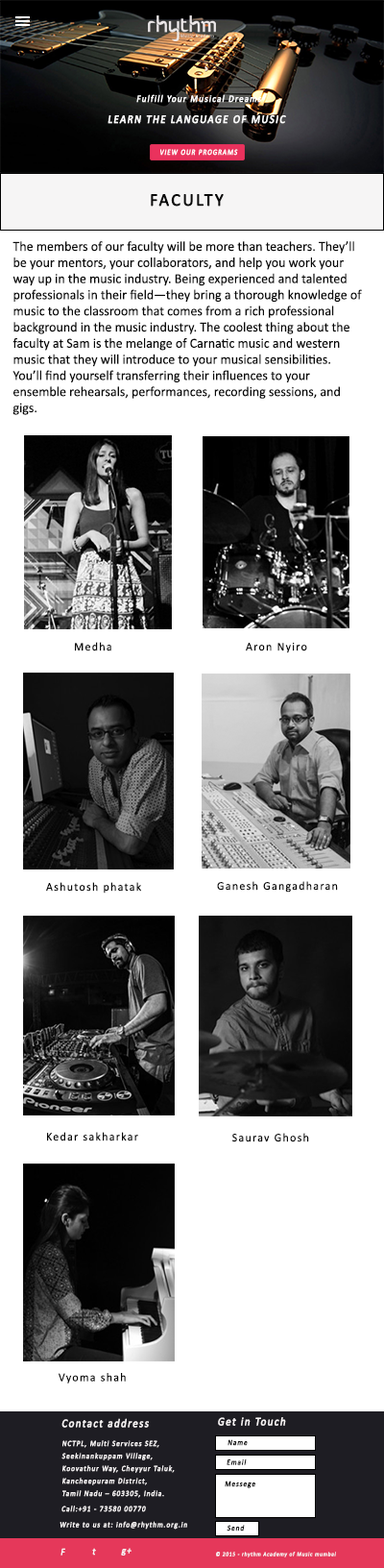
<style>
.page{position:relative;width:384px;height:1568px;background:#ffffff}
.page>*{position:absolute;margin:0}
.t1{font:9.8px "Calibri";letter-spacing:0.105em;color:#fdfdfd;font-weight:bold;font-style:italic;scale:0.88 1}
.t2{font:11.8px "Calibri";letter-spacing:0.105em;color:#fdfdfd;font-weight:bold;font-style:italic;scale:0.88 1}
.t3{font:7.8px "Calibri";letter-spacing:0.105em;color:#fefcfc;font-weight:bold;font-style:italic;scale:0.87 1}
.t4{font:17.6px "Calibri";letter-spacing:0.105em;color:#0a0a0a;font-weight:bold}
.t5{font:13.7px "Calibri";color:#0a0a0a}
.t6{font:11.8px "Calibri";letter-spacing:0.105em;color:#090909}
.t7{font:11.8px "Calibri";letter-spacing:0.105em;color:#f6f3f4;font-weight:bold;font-style:italic;scale:0.88 1}
.t8{font:7.8px/12.5px "Calibri";letter-spacing:0.105em;color:#f6f3f4;font-weight:bold;font-style:italic;scale:0.88 1}
.t9{font:7.8px "Calibri";letter-spacing:0.105em;color:#151515;font-weight:bold;font-style:italic;scale:0.88 1}
.t10{font:7.8px "Calibri";letter-spacing:0.105em;color:#f6f3f4;font-weight:bold;font-style:italic;scale:0.88 1}
.t11{font:9.8px "Calibri";letter-spacing:0.105em;color:#f6f3f4;font-weight:bold;font-style:italic;scale:0.88 1}
.t12{font:5.9px "Calibri";letter-spacing:0.105em;color:#f6f3f4;font-weight:bold;font-style:italic;scale:0.88 1}
</style>
<div class="page">
<p class="t1" style="left:136px;top:94px;width:126px;height:9px">Fulfill Your Musical Dreams</p>
<p class="t2" style="left:108px;top:114px;width:178px;height:10px">LEARN THE LANGUAGE OF MUSIC</p>
<p class="t3" style="left:160px;top:149px;width:78px;height:7px">VIEW OUR PROGRAMS</p>
<p class="t4" style="left:151px;top:194px;width:73px;height:13px">FACULTY</p>
<p class="t5" style="left:12px;top:241px;width:350px;height:174px">The members of our faculty will be more than teachers. They’ll <br>be your mentors, your collaborators, and help you work your <br>way up in the music industry. Being experienced and talented <br>professionals in their field—they bring a thorough knowledge of <br>music to the classroom that comes from a rich professional <br>background in the music industry. The coolest thing about the <br>faculty at Sam is the melange of Carnatic music and western <br>music that they will introduce to your musical sensibilities. <br>You’ll find yourself transferring their influences to your <br>ensemble rehearsals, performances, recording sessions, and <br>gigs.</p>
<p class="t6" style="left:75px;top:642px;width:36px;height:9px">Medha</p>
<p class="t6" style="left:246px;top:643px;width:61px;height:10px">Aron Nyiro</p>
<p class="t6" style="left:217px;top:881px;width:121px;height:12px">Ganesh Gangadharan</p>
<p class="t6" style="left:46px;top:882px;width:95px;height:12px">Ashutosh phatak</p>
<p class="t6" style="left:47px;top:1132px;width:91px;height:9px">Kedar sakharkar</p>
<p class="t6" style="left:233px;top:1133px;width:76px;height:9px">Saurav Ghosh</p>
<p class="t6" style="left:59px;top:1373px;width:67px;height:11px">Vyoma shah</p>
<p class="t7" style="left:61px;top:1418px;width:88px;height:10px">Contact address</p>
<p class="t7" style="left:218px;top:1417px;width:68px;height:9px">Get in Touch</p>
<p class="t8" style="left:61px;top:1440px;width:114px;height:58px">NCTPL, Multi Services SEZ, <br>Seekinankuppam Village, <br>Koovathur Way, Cheyyur Taluk, <br>Kancheepuram District, <br>Tamil Nadu – 603305, India.</p>
<p class="t9" style="left:228px;top:1439px;width:20px;height:7px">Name</p>
<p class="t9" style="left:227px;top:1458px;width:20px;height:7px">Email</p>
<p class="t9" style="left:225px;top:1481px;width:31px;height:7px">Messege</p>
<p class="t10" style="left:61px;top:1506px;width:85px;height:6px">Call:+91 - 73580 00770</p>
<p class="t10" style="left:60px;top:1521px;width:127px;height:9px">Write to us at: info@rhythm.org.in</p>
<p class="t9" style="left:227px;top:1525px;width:18px;height:6px">Send</p>
<p class="t11" style="left:61px;top:1548px;width:4px;height:8px">F</p>
<p class="t11" style="left:92px;top:1548px;width:4px;height:8px">t</p>
<p class="t11" style="left:121px;top:1548px;width:11px;height:8px">g+</p>
<p class="t12" style="left:216px;top:1552px;width:120px;height:5px">© 2015 - rhythm Academy of Music mumbai</p>
</div>
